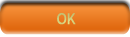
<style>
.page{position:relative;width:130px;height:37px}
.page>*{position:absolute;margin:0}
.t1{font:15px "TrebuchetMS";color:#d1ce7b}
</style>
<div class="page">
<p class="t1" style="left:57px;top:13px;width:19px;height:12px">OK</p>
</div>
